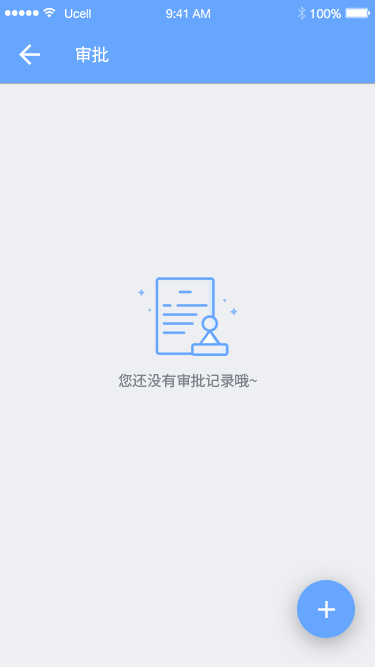
<style>
.page{position:relative;width:375px;height:667px;background:#edeff2}
.page>*{position:absolute;margin:0}
.t1{font:17.3px "NotoSansHans-Regular";color:#ffffff}
.t2{font:14.5px "NotoSansHans-Regular";color:#7e848c}
</style>
<div class="page">
<p class="t1" style="left:76px;top:46px;width:33px;height:17px">审批</p>
<p class="t2" style="left:118px;top:373px;width:139px;height:15px">您还没有审批记录哦~</p>
</div>
